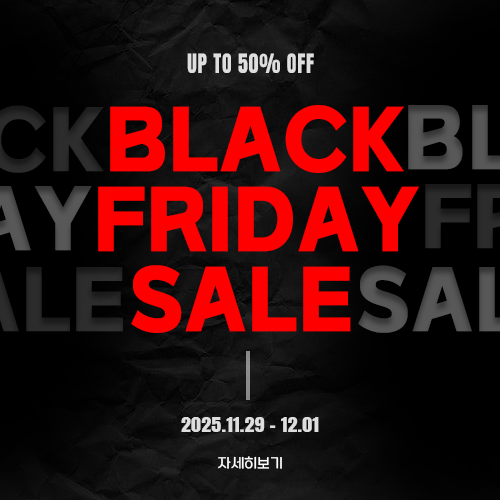
<style>
.page{position:relative;width:500px;height:500px}
.page>*{position:absolute;margin:0}
.t1{font:22.6px "AntonSC-Regular";letter-spacing:0.04em;color:#dedede;scale:0.88 1}
.t2{font:81px "SBAggroB";color:#ff0000;scale:0.92 1}
.t3{font:18px "AntonSC-Regular";color:#dedede;scale:1.14 1}
.t4{font:14px "SBAggroL";color:#ffffff}
</style>
<div class="page">
<p class="t1" style="left:187px;top:53px;width:127px;height:20px">UP TO 50% OFF</p>
<p class="t2" style="left:110px;top:105px;width:294px;height:68px">BLACK</p>
<p class="t2" style="left:98px;top:186px;width:321px;height:66px">FRIDAY</p>
<p class="t2" style="left:131px;top:265px;width:220px;height:68px">SALE</p>
<p class="t3" style="left:181px;top:417px;width:138px;height:15px">2025.11.29 - 12.01</p>
<p class="t4" style="left:218px;top:456px;width:64px;height:13px">자세히보기</p>
</div>
